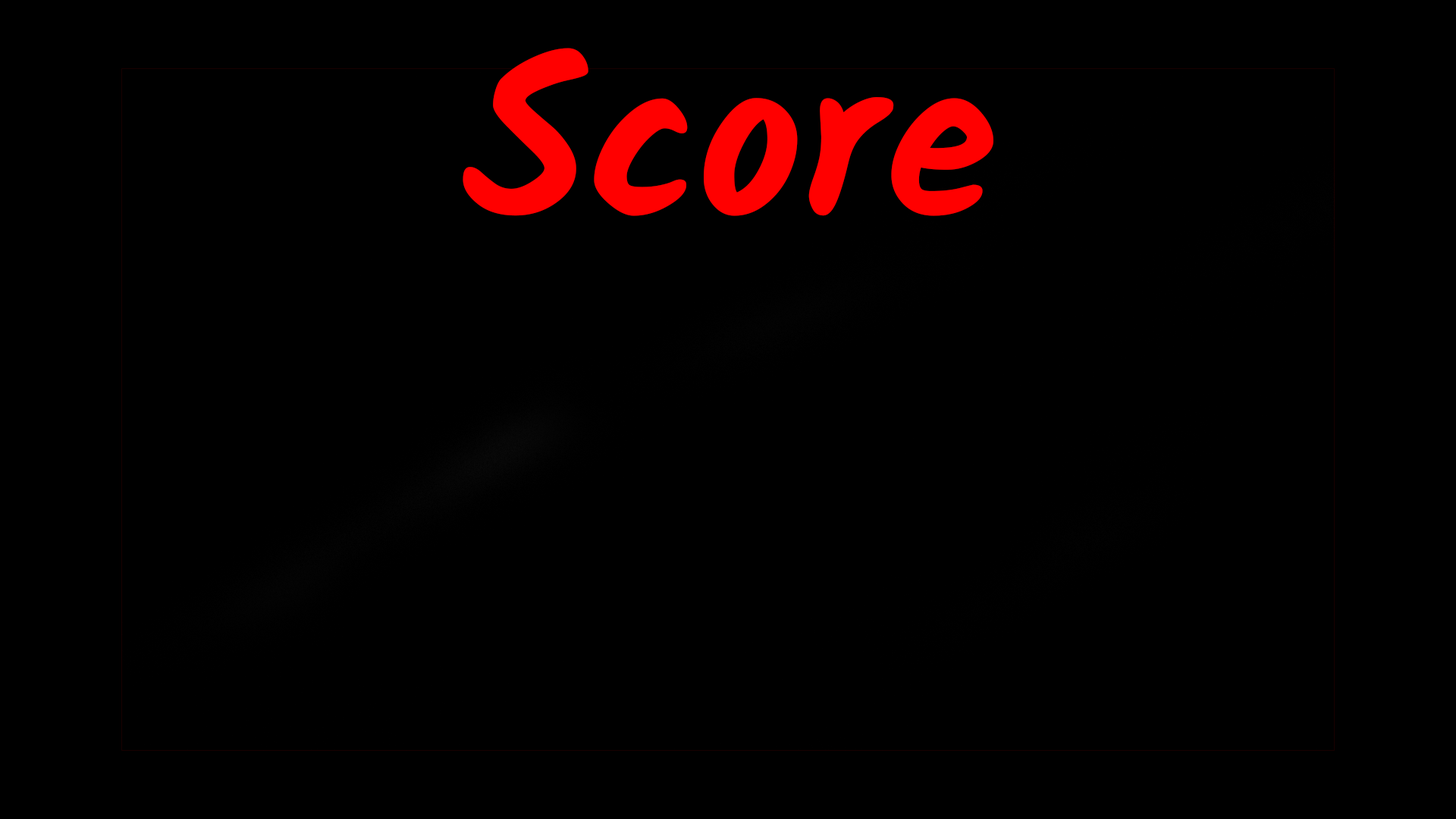
<style>
.page{position:relative;width:1456px;height:819px;background:#000000}
.page>*{position:absolute;margin:0}
.t1{font:227.5px "Kalam-Bold";color:#ff0000}
</style>
<div class="page">
<p class="t1" style="left:463px;top:48px;width:530px;height:168px">Score</p>
</div>
